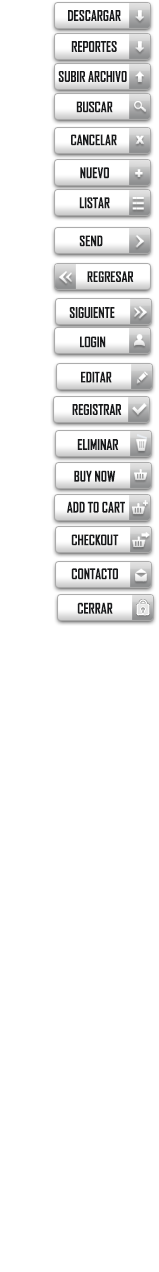
<style>
.page{position:relative;width:159px;height:1272px;background:#ffffff}
.page>*{position:absolute;margin:0}
.t1{font:14px "AgencyFB-Bold";color:#191a1c;text-transform:uppercase;scale:0.94 1}
.t2{font:10.8px "Arial-Black";color:#ffffff;text-transform:uppercase;scale:0.94 1}
.t3{font:14px "Arial-Black";color:#ffffff;text-transform:uppercase;scale:0.94 1}
.t4{font:12px "Arial-Black";color:#ffffff;text-transform:uppercase;scale:0.94 1}
</style>
<div class="page">
<p class="t1" style="left:68px;top:10px;width:53px;height:11px">Descargar</p>
<p class="t1" style="left:71px;top:41px;width:46px;height:11px">Reportes</p>
<p class="t1" style="left:58px;top:71px;width:69px;height:11px">Subir Archivo</p>
<p class="t1" style="left:76px;top:101px;width:37px;height:12px">Buscar</p>
<p class="t1" style="left:71px;top:134px;width:46px;height:12px">cancelar</p>
<p class="t2" style="left:135px;top:135px;width:9px;height:9px">x</p>
<p class="t1" style="left:80px;top:167px;width:29px;height:12px">NUevo</p>
<p class="t3" style="left:135px;top:169px;width:8px;height:8px">+</p>
<p class="t1" style="left:79px;top:197px;width:31px;height:12px">Listar</p>
<p class="t4" style="left:132px;top:197px;width:12px;height:2px">---</p>
<p class="t4" style="left:132px;top:202px;width:12px;height:3px">---</p>
<p class="t4" style="left:132px;top:207px;width:12px;height:3px">---</p>
<p class="t1" style="left:79px;top:235px;width:24px;height:12px">send</p>
<p class="t1" style="left:87px;top:271px;width:47px;height:11px">Regresar</p>
<p class="t1" style="left:69px;top:307px;width:46px;height:11px">Siguiente</p>
<p class="t1" style="left:80px;top:336px;width:26px;height:12px">login</p>
<p class="t1" style="left:81px;top:371px;width:31px;height:12px">Editar</p>
<p class="t1" style="left:72px;top:404px;width:50px;height:11px">Registrar</p>
<p class="t1" style="left:77px;top:439px;width:42px;height:11px">Eliminar</p>
<p class="t1" style="left:74px;top:470px;width:42px;height:12px">buy now</p>
<p class="t1" style="left:67px;top:501px;width:58px;height:12px">add to cart</p>
<p class="t1" style="left:71px;top:534px;width:48px;height:12px">checkout</p>
<p class="t1" style="left:71px;top:568px;width:47px;height:12px">contacto</p>
<p class="t1" style="left:77px;top:602px;width:36px;height:12px">Cerrar</p>
</div>
